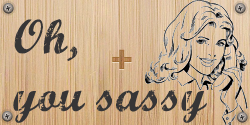
<style>
.page{position:relative;width:250px;height:125px}
.page>*{position:absolute;margin:0}
.t1{font:9px "Helvetica";color:#292626}
.t2{font:48px "MarcelleScript";color:#363536}
.t3{font:36px "Helvetica-Bold";color:#a77547}
</style>
<div class="page">
<p class="t1" style="left:5px;top:6px;width:6px;height:5px;rotate:-16deg">+</p>
<p class="t1" style="left:237px;top:6px;width:6px;height:5px;rotate:-16deg">+</p>
<p class="t2" style="left:13px;top:19px;width:194px;height:104px">Oh, <br>you sassy</p>
<p class="t3" style="left:112px;top:49px;width:20px;height:20px">+</p>
<p class="t1" style="left:4px;top:114px;width:6px;height:5px;rotate:-16deg">+</p>
<p class="t1" style="left:239px;top:115px;width:6px;height:5px;rotate:-16deg">+</p>
</div>
